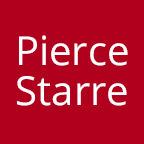
<style>
.page{position:relative;width:144px;height:144px;background:#b1001e}
.page>*{position:absolute;margin:0}
.t1{font:40px/40px "OpenSans";color:#ffffff}
</style>
<div class="page">
<p class="t1" style="left:17px;top:35px;width:111px;height:71px;text-align:center">Pierce<br>Starre</p>
</div>
